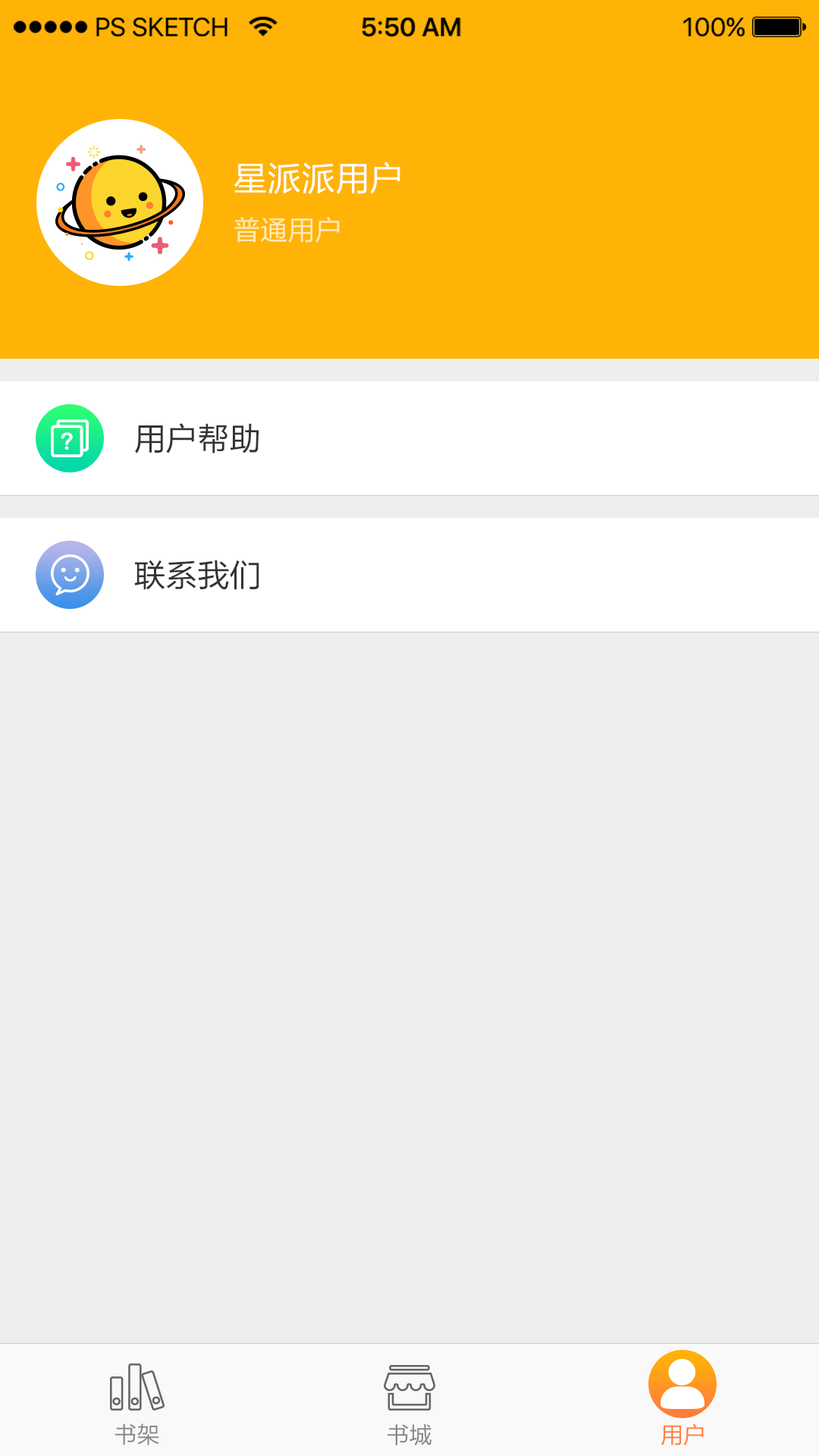
<style>
.page{position:relative;width:819px;height:1456px;background:#eeeeee}
.page>*{position:absolute;margin:0}
.t1{font:34.1px "FZLTHK--GBK1-0";color:#ffffff}
.t2{font:27.3px "FZLTHK--GBK1-0";color:#ffe9b6}
.t3{font:31.8px "FZLTHK--GBK1-0";color:#333333}
.t4{font:22.7px "FZLTHK--GBK1-0";color:#888888}
.t5{font:22.7px "FZLTHK--GBK1-0";color:#ff7e3a}
</style>
<div class="page">
<p class="t1" style="left:234px;top:162px;width:166px;height:32px">星派派用户</p>
<p class="t2" style="left:234px;top:216px;width:106px;height:27px">普通用户</p>
<p class="t3" style="left:135px;top:423px;width:124px;height:30px">用户帮助</p>
<p class="t3" style="left:134px;top:560px;width:125px;height:30px">联系我们</p>
<p class="t4" style="left:115px;top:1423px;width:44px;height:22px">书架</p>
<p class="t4" style="left:388px;top:1424px;width:43px;height:21px">书城</p>
<p class="t5" style="left:661px;top:1423px;width:43px;height:22px">用户</p>
</div>
